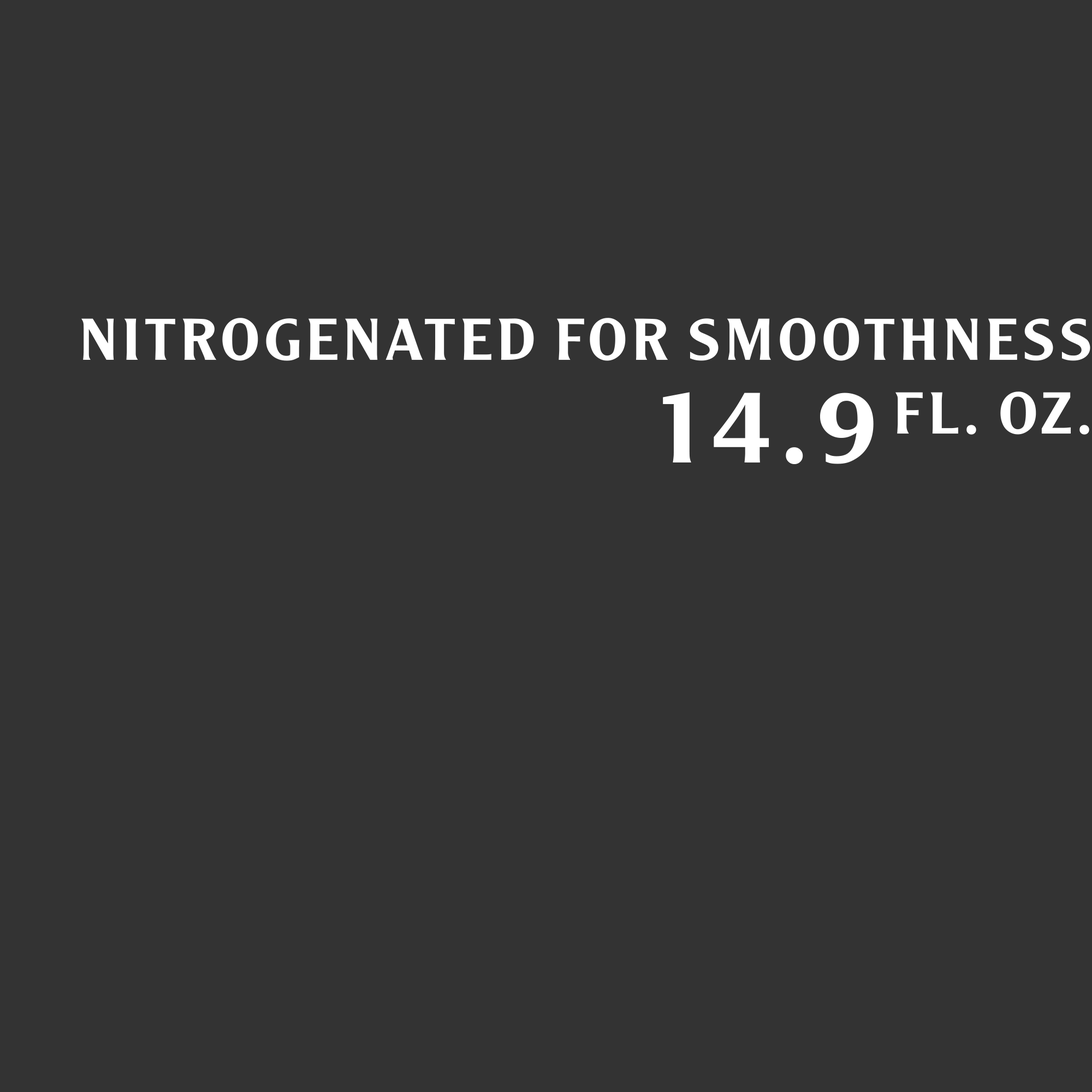
<style>
.page{position:relative;width:1092px;height:1092px;background:#333333}
.page>*{position:absolute;margin:0}
.t1{font:61.4px "URWAgendaW01-Light";letter-spacing:0.075em;color:#ffffff}
.t2{font:109.2px "URWAgendaW01-Light";letter-spacing:0.075em;color:#ffffff}
</style>
<div class="page">
<p class="t1" style="left:81px;top:318px;width:1009px;height:117px;text-align:right">NITROGENATED FOR SMOOTHNESS<br> FL. OZ.</p>
<p class="t2" style="left:663px;top:392px;width:211px;height:72px">14.9</p>
</div>
